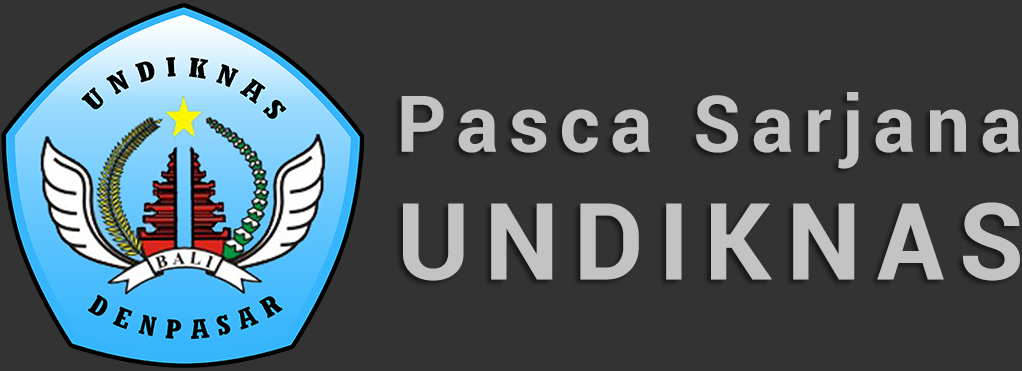
<style>
.page{position:relative;width:1022px;height:371px;background:#333333}
.page>*{position:absolute;margin:0}
.t1{font:78.1px "Roboto-Bold";letter-spacing:0.139em;color:#c3c3c3}
.t2{font:106.4px "Roboto-Bold";letter-spacing:0.139em;color:#c3c3c3}
</style>
<div class="page">
<p class="t1" style="left:401px;top:92px;width:620px;height:77px">Pasca Sarjana</p>
<p class="t2" style="left:403px;top:202px;width:617px;height:79px">UNDIKNAS</p>
</div>
